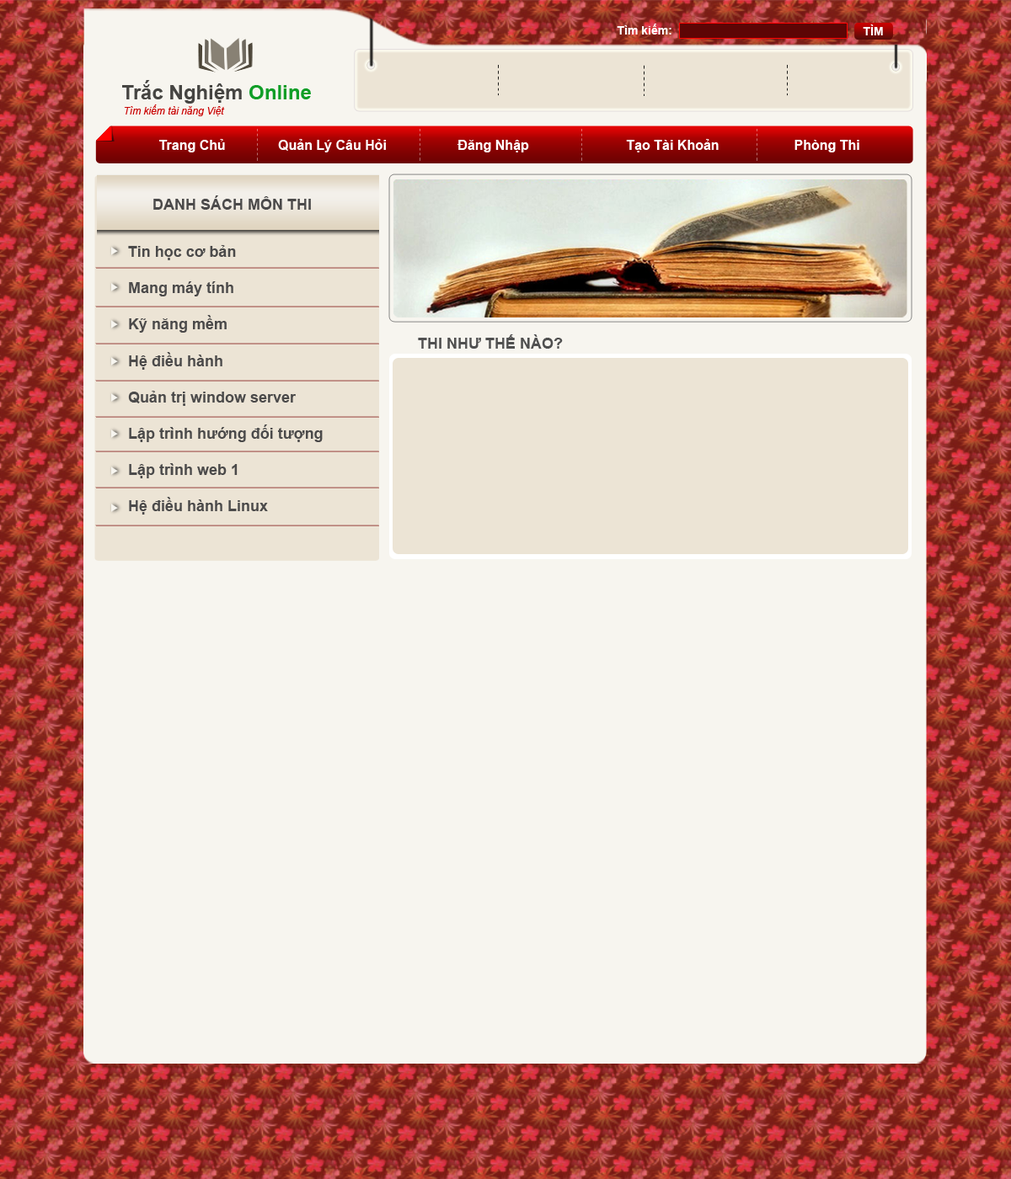
<style>
.page{position:relative;width:1011px;height:1179px;background:#f7f5ef}
.page>*{position:absolute;margin:0}
.t1{font:11.8px "Arial-BoldMT";color:#ffffff}
.t2{font:20.2px "Arial-BoldMT";color:#464542}
.t3{font:20.2px "Arial-BoldMT";color:#0f9e27}
.t4{font:10.1px "Arial-ItalicMT";color:#ca0303}
.t5{font:13.5px "Arial-BoldMT";color:#ffffff}
.t6{font:15.2px "Arial-BoldMT";color:#4b4a4a}
.t7{font:15.2px "Arial-BoldMT";color:#505050}
</style>
<div class="page">
<p class="t1" style="left:617px;top:24px;width:54px;height:11px">Tìm kiếm:</p>
<p class="t1" style="left:863px;top:24px;width:20px;height:11px">TÌM</p>
<p class="t2" style="left:122px;top:80px;width:189px;height:24px">Trắc Nghiệm <span class="t3">Online</span></p>
<p class="t4" style="left:124px;top:104px;width:101px;height:12px">Tìm kiếm tài năng Việt</p>
<p class="t5" style="left:159px;top:139px;width:700px;height:13px">Trang Chủ              Quản Lý Câu Hỏi                   Đăng Nhập                          Tạo Tài Khoản                    Phòng Thi</p>
<p class="t6" style="left:153px;top:195px;width:158px;height:15px">DANH SÁCH MÔN THI</p>
<p class="t6" style="left:128px;top:245px;width:195px;height:270px">Tin học cơ bản<br><br>Mang máy tính<br><br>Kỹ năng mềm<br><br>Hệ điều hành<br><br>Quản trị window server<br><br>Lập trình hướng đối tượng<br><br>Lập trình web 1<br><br>Hệ điều hành Linux</p>
<p class="t7" style="left:418px;top:334px;width:145px;height:15px">THI NHƯ THẾ NÀO?</p>
</div>
